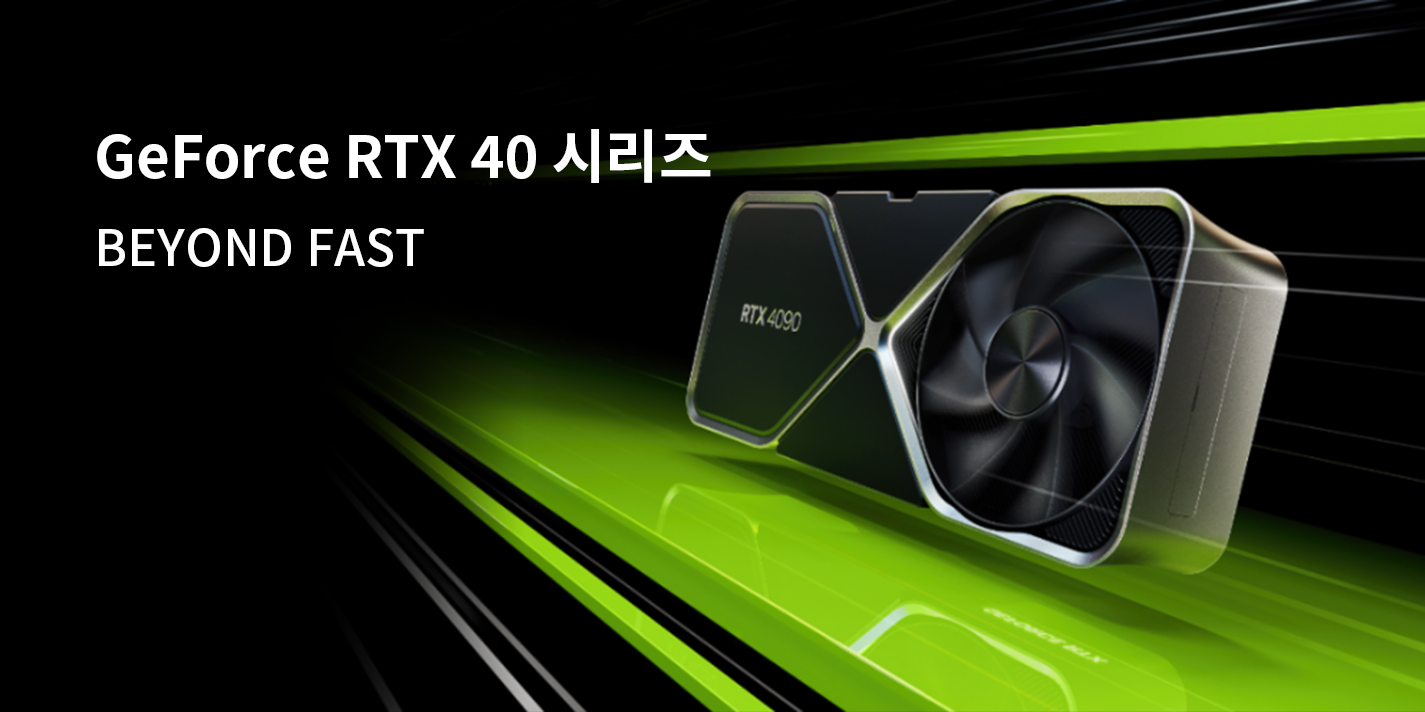
<style>
.page{position:relative;width:1425px;height:712px;background:#000000}
.page>*{position:absolute;margin:0}
.t1{font:58.3px "NotoSansKR-Bold";color:#ffffff}
.t2{font:50px "NotoSansKR-Medium";color:#ffffff}
</style>
<div class="page">
<p class="t1" style="left:97px;top:129px;width:614px;height:54px">GeForce RTX 40 시리즈</p>
<p class="t2" style="left:99px;top:228px;width:325px;height:39px">BEYOND FAST</p>
</div>
